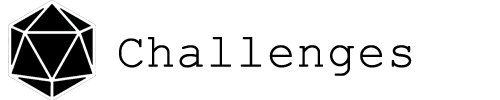
<style>
.page{position:relative;width:500px;height:100px;background:#ffffff}
.page>*{position:absolute;margin:0}
.t1{font:48px "CourierNewPSMT";color:#000000;font-weight:bold}
</style>
<div class="page">
<p class="t1" style="left:119px;top:37px;width:293px;height:39px">Challenges</p>
</div>
